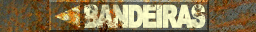
<style>
.page{position:relative;width:256px;height:32px}
.page>*{position:absolute;margin:0}
.t1{font:30.7px "Arial-Black";letter-spacing:-0.1em;color:#ffffc9;text-transform:uppercase;font-weight:bold;scale:0.67 1}
</style>
<div class="page">
<p class="t1" style="left:84px;top:4px;width:122px;height:24px">bandeiras</p>
</div>
